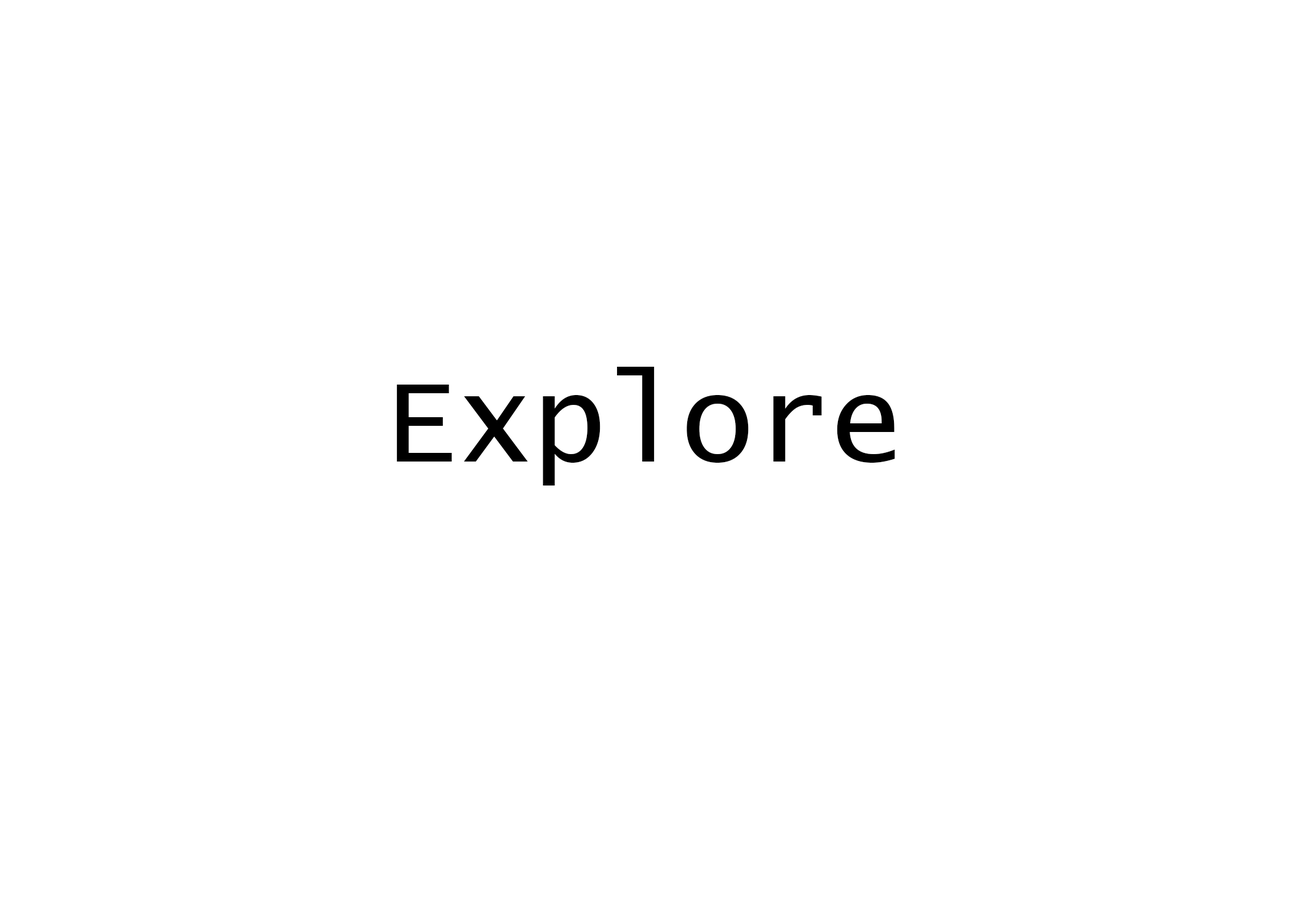
<style>
.page{position:relative;width:1292px;height:923px;background:#ffffff}
.page>*{position:absolute;margin:0}
.t1{font:123.1px "LucidaConsole";color:#000000}
</style>
<div class="page">
<p class="t1" style="left:397px;top:367px;width:498px;height:118px">Explore</p>
</div>
